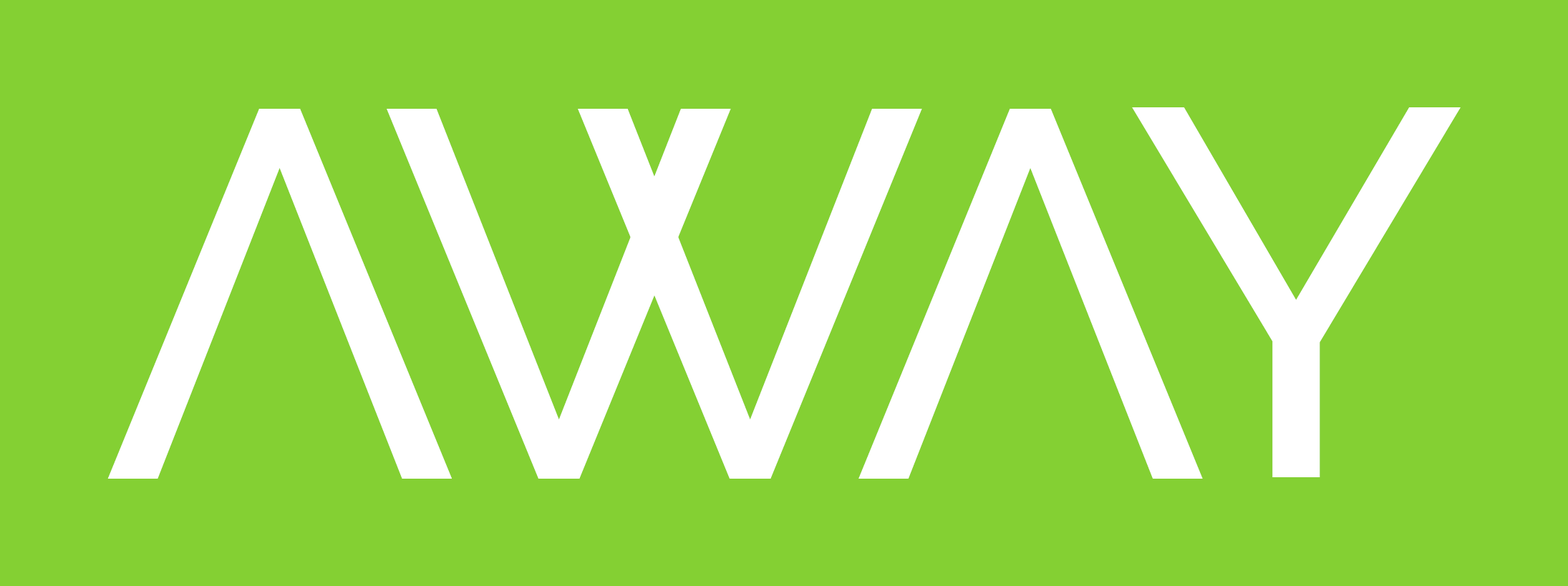
<style>
.page{position:relative;width:1568px;height:586px;background:#84d033}
.page>*{position:absolute;margin:0}
.t1{font:521.3px "Raleway-Medium";letter-spacing:-0.075em;color:#ffffff;text-transform:uppercase}
</style>
<div class="page">
<p class="t1" style="left:107px;top:109px;width:345px;height:370px;rotate:180deg">V</p>
<p class="t1" style="left:387px;top:109px;width:344px;height:370px">V</p>
<p class="t1" style="left:578px;top:109px;width:344px;height:370px">V</p>
<p class="t1" style="left:858px;top:109px;width:345px;height:370px;rotate:180deg">V</p>
<p class="t1" style="left:1132px;top:107px;width:329px;height:371px">Y</p>
</div>
